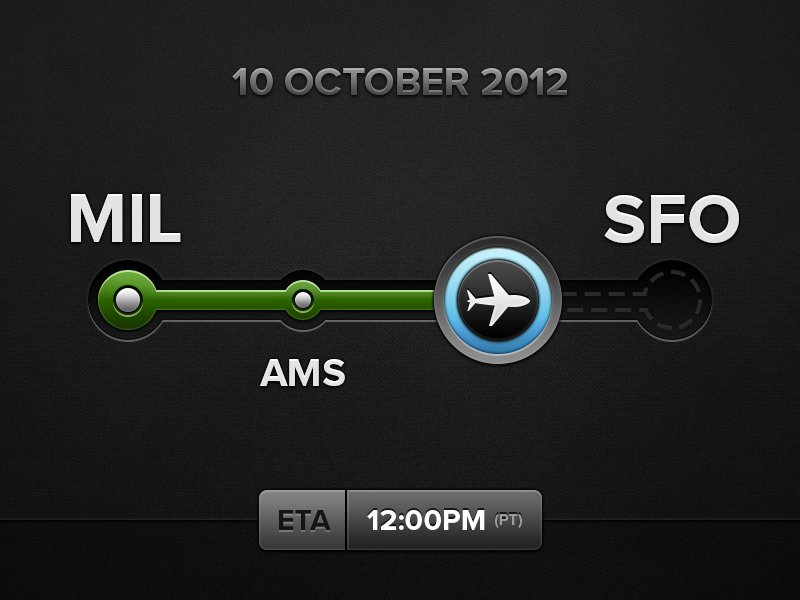
<style>
.page{position:relative;width:800px;height:600px}
.page>*{position:absolute;margin:0}
.t1{font:40.1px "ProximaNova-Bold"}
.t2{font:71.3px "ProximaNova-Bold";color:#e3e3e3}
.t3{font:40px "ProximaNova-Bold";color:#e3e3e3}
.t4{font:30px "ProximaNova-Bold";color:#151515}
.t5{font:30px "ProximaNova-Bold";color:#ffffff}
.t6{font:16px "ProximaNova-Bold";color:#9c9c9c}
</style>
<div class="page">
<p class="t1" style="left:232px;top:68px;width:335px;height:27px">10 OCTOBER 2012</p>
<p class="t2" style="left:71px;top:194px;width:110px;height:48px">MIL</p>
<p class="t2" style="left:604px;top:195px;width:135px;height:48px">SFO</p>
<p class="t3" style="left:260px;top:359px;width:85px;height:27px">AMS</p>
<p class="t4" style="left:279px;top:510px;width:52px;height:20px">ETA</p>
<p class="t5" style="left:367px;top:510px;width:155px;height:20px">12:00PM <span class="t6">(PT)</span></p>
</div>
